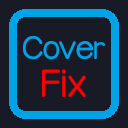
<style>
.page{position:relative;width:128px;height:128px;background:#181a26}
.page>*{position:absolute;margin:0}
.t1{font:33.3px "©M¥­²Ê¶ê";color:#00a2e8}
.t2{font:40px "©M¥­²Ê¶ê";color:#ff0000}
</style>
<div class="page">
<p class="t1" style="left:23px;top:36px;width:82px;height:24px">Cover</p>
<p class="t2" style="left:42px;top:69px;width:44px;height:28px">Fix</p>
</div>
